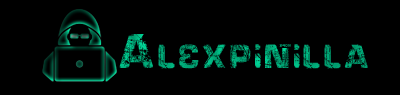
<style>
.page{position:relative;width:400px;height:95px;background:#000000}
.page>*{position:absolute;margin:0}
.t1{font:36.7px "HackingTrashed-Regular";letter-spacing:0.03em;color:#00ab79}
.t2{font:53.6px "HackingTrashed-Regular";letter-spacing:0.03em;color:#00ab79}
</style>
<div class="page">
<p class="t1" style="left:119px;top:34px;width:249px;height:35px"><span class="t2">A</span>lexPinilla</p>
</div>
